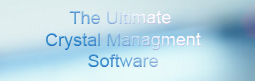
<style>
.page{position:relative;width:255px;height:81px}
.page>*{position:absolute;margin:0}
.t1{font:18px "ArialMT"}
</style>
<div class="page">
<p class="t1" style="left:45px;top:11px;width:156px;height:56px;text-align:center">The Ultimate <br>Crystal Managment<br>Software</p>
</div>
